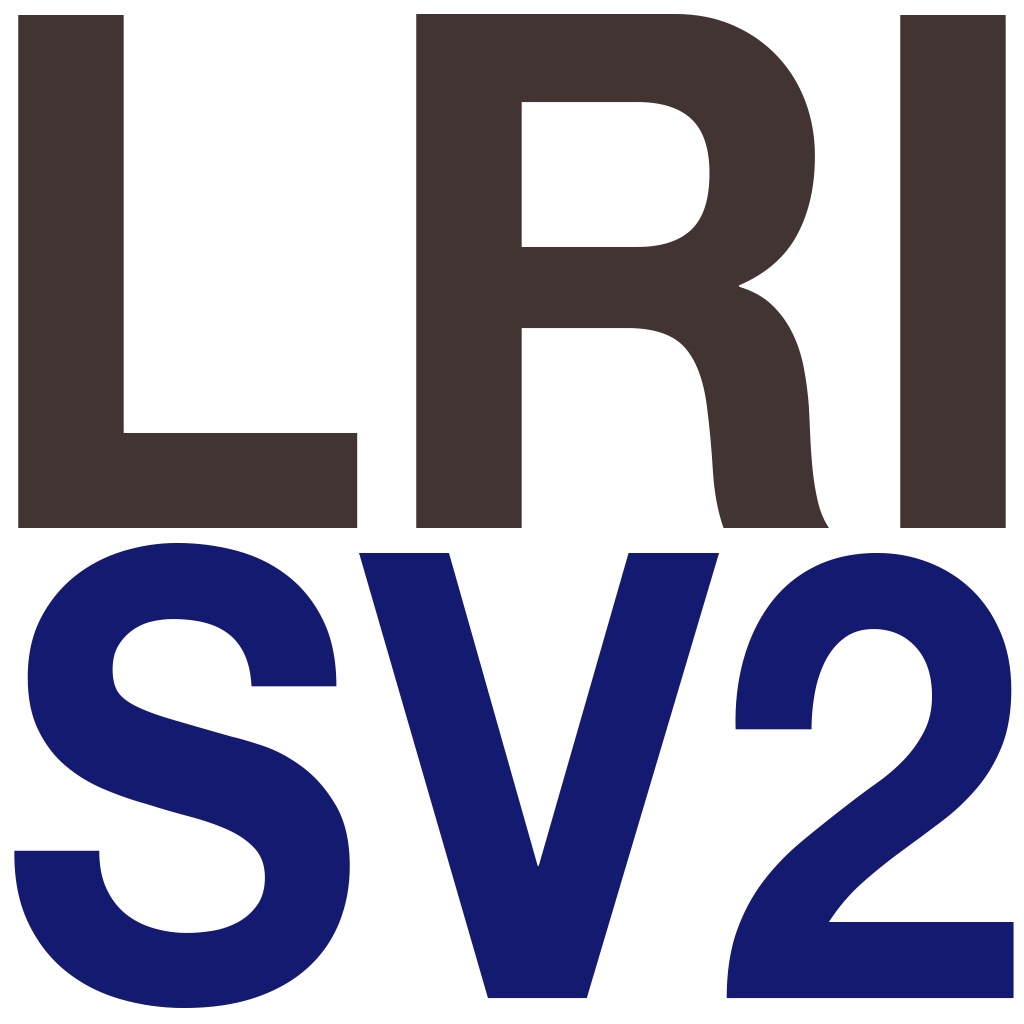
<style>
.page{position:relative;width:1024px;height:1024px;background:#ffffff}
.page>*{position:absolute;margin:0}
.t1{font:719px "HelveticaNeue-Bold";color:#433434;scale:0.93 1}
.t2{font:623.3px "HelveticaNeue-Bold";color:#141a6f;scale:0.9 1}
</style>
<div class="page">
<p class="t1" style="left:18px;top:14px;width:988px;height:514px">LRI</p>
<p class="t2" style="left:14px;top:543px;width:1000px;height:465px">SV2</p>
</div>
